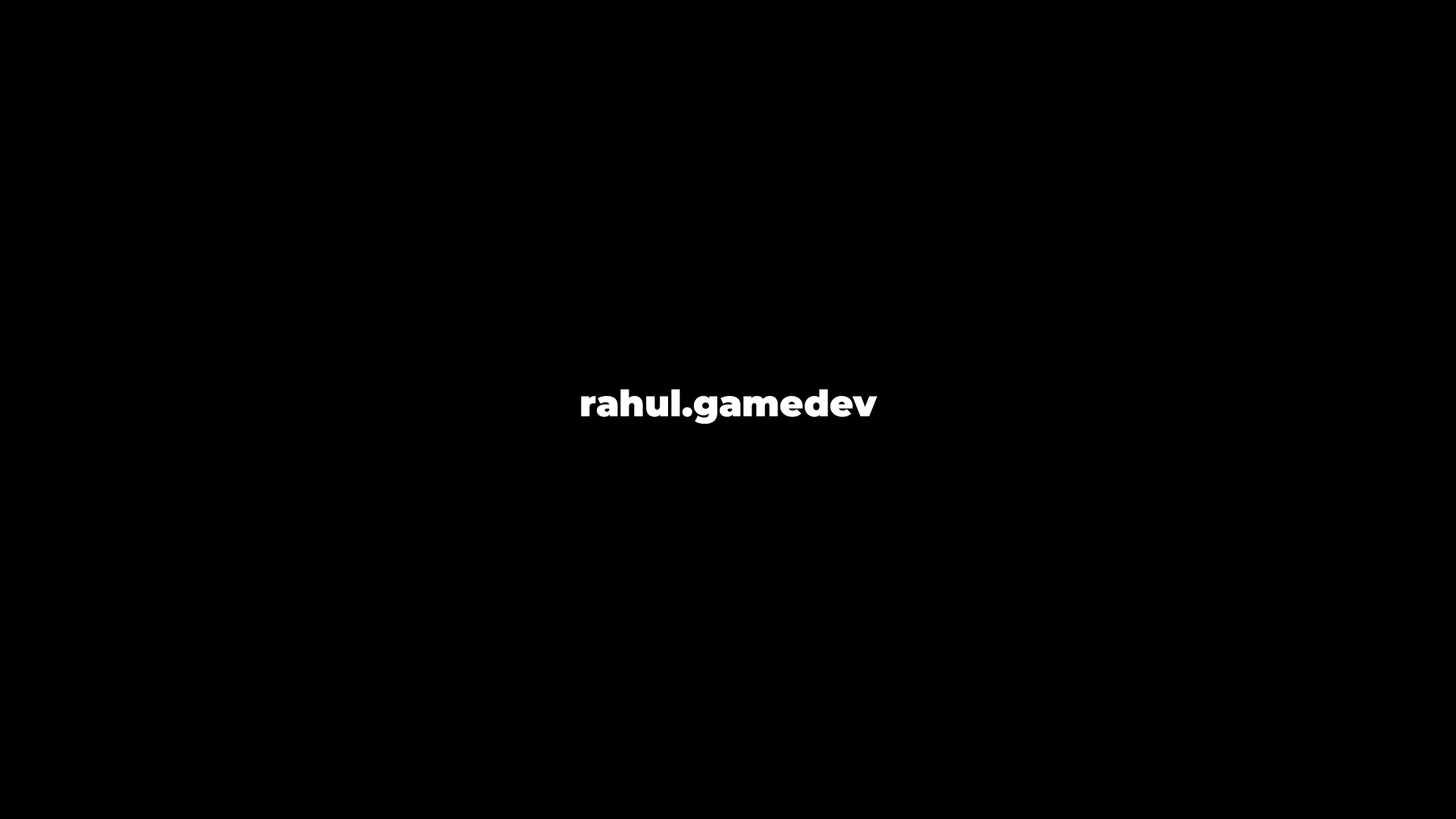
<style>
.page{position:relative;width:1456px;height:819px;background:#000000}
.page>*{position:absolute;margin:0}
.t1{font:36.4px "Montserrat-Black";color:#ffffff}
</style>
<div class="page">
<p class="t1" style="left:581px;top:389px;width:296px;height:35px">rahul.gamedev</p>
</div>
